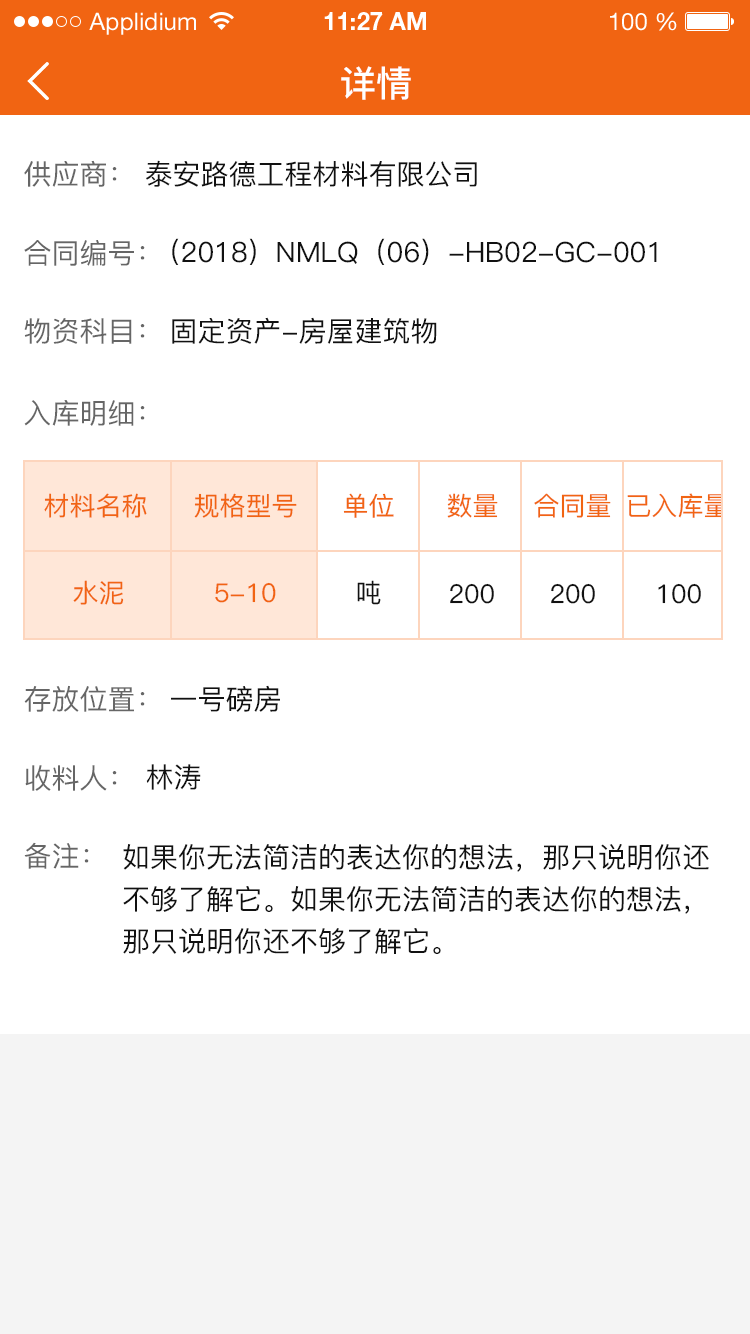
<style>
.page{position:relative;width:750px;height:1334px;background:#ffffff}
.page>*{position:absolute;margin:0}
.t1{font:36px "PingFang-SC-Bold";color:#ffffff}
.t2{font:28px "PingFang-SC-Medium";color:#666666}
.t3{font:28px "PingFang-SC-Medium";color:#111111}
.t4{font:26px "PingFang-SC-Medium";color:#f16412}
.t5{font:26px "PingFang-SC-Medium";color:#111111}
.t6{font:28px/42px "PingFang-SC-Medium";color:#111111}
</style>
<div class="page">
<p class="t1" style="left:341px;top:66px;width:70px;height:34px">详情</p>
<p class="t2" style="left:24px;top:160px;width:93px;height:27px">供应商：</p>
<p class="t3" style="left:146px;top:160px;width:331px;height:27px">泰安路德工程材料有限公司</p>
<p class="t2" style="left:24px;top:240px;width:121px;height:26px">合同编号：</p>
<p class="t3" style="left:172px;top:238px;width:485px;height:27px">（2018）NMLQ（06）-HB02-GC-001</p>
<p class="t2" style="left:24px;top:318px;width:121px;height:26px">物资科目：</p>
<p class="t3" style="left:172px;top:317px;width:265px;height:27px">固定资产-房屋建筑物</p>
<p class="t2" style="left:24px;top:400px;width:121px;height:26px">入库明细：</p>
<p class="t4" style="left:44px;top:493px;width:103px;height:25px">材料名称</p>
<p class="t4" style="left:194px;top:493px;width:103px;height:25px">规格型号</p>
<p class="t4" style="left:343px;top:493px;width:51px;height:25px">单位</p>
<p class="t4" style="left:447px;top:493px;width:51px;height:25px">数量</p>
<p class="t4" style="left:534px;top:493px;width:77px;height:25px">合同量</p>
<p class="t4" style="left:627px;top:493px;width:110px;height:25px">已入库量)</p>
<p class="t4" style="left:73px;top:580px;width:51px;height:25px">水泥</p>
<p class="t4" style="left:215px;top:582px;width:61px;height:21px">5-10</p>
<p class="t5" style="left:357px;top:580px;width:24px;height:25px">吨</p>
<p class="t5" style="left:450px;top:583px;width:44px;height:21px">200</p>
<p class="t5" style="left:551px;top:583px;width:44px;height:21px">200</p>
<p class="t5" style="left:658px;top:583px;width:43px;height:21px">100</p>
<p class="t2" style="left:24px;top:685px;width:121px;height:27px">存放位置：</p>
<p class="t3" style="left:171px;top:685px;width:109px;height:27px">一号磅房</p>
<p class="t2" style="left:25px;top:765px;width:92px;height:26px">收料人：</p>
<p class="t3" style="left:146px;top:764px;width:55px;height:26px">林涛</p>
<p class="t2" style="left:24px;top:842px;width:65px;height:27px">备注：</p>
<p class="t6" style="left:123px;top:844px;width:586px;height:110px">如果你无法简洁的表达你的想法，那只说明你还<br>不够了解它。如果你无法简洁的表达你的想法，<br>那只说明你还不够了解它。</p>
</div>
